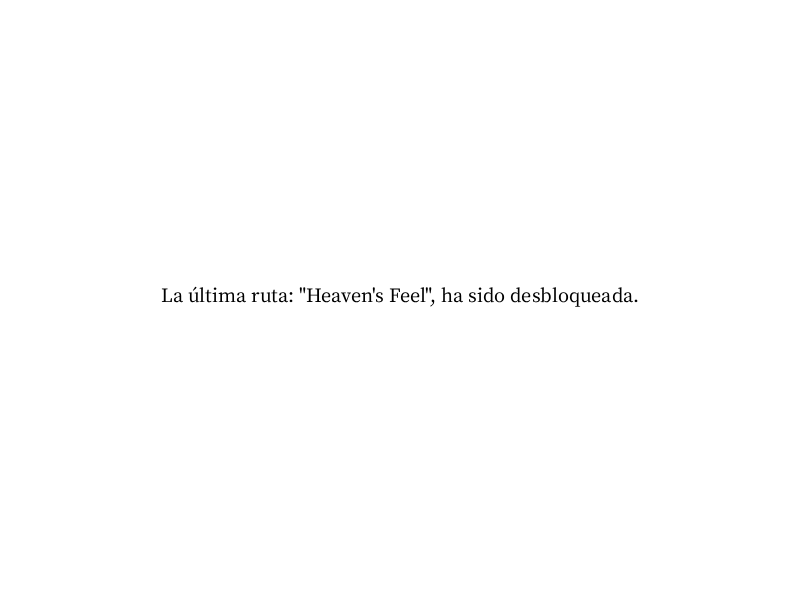
<style>
.page{position:relative;width:800px;height:600px;background:#ffffff}
.page>*{position:absolute;margin:0}
.t1{font:22px "OfficialFateFont-Medium";color:#000000}
</style>
<div class="page">
<p class="t1" style="left:161px;top:286px;width:477px;height:21px">La última ruta: "Heaven's Feel", ha sido desbloqueada.</p>
</div>
